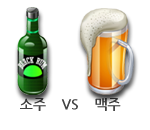
<style>
.page{position:relative;width:150px;height:130px;background:#ffffff}
.page>*{position:absolute;margin:0}
.t1{font:14px "NanumGothicBold";color:#444444}
</style>
<div class="page">
<p class="t1" style="left:20px;top:98px;width:101px;height:13px">소주    VS    맥주</p>
</div>
